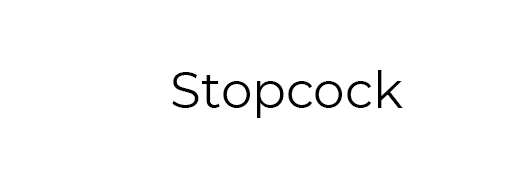
<style>
.page{position:relative;width:527px;height:180px;background:#ffffff}
.page>*{position:absolute;margin:0}
.t1{font:50px "Montserrat-Regular";color:#000000}
</style>
<div class="page">
<p class="t1" style="left:172px;top:70px;width:231px;height:48px">Stopcock</p>
</div>
